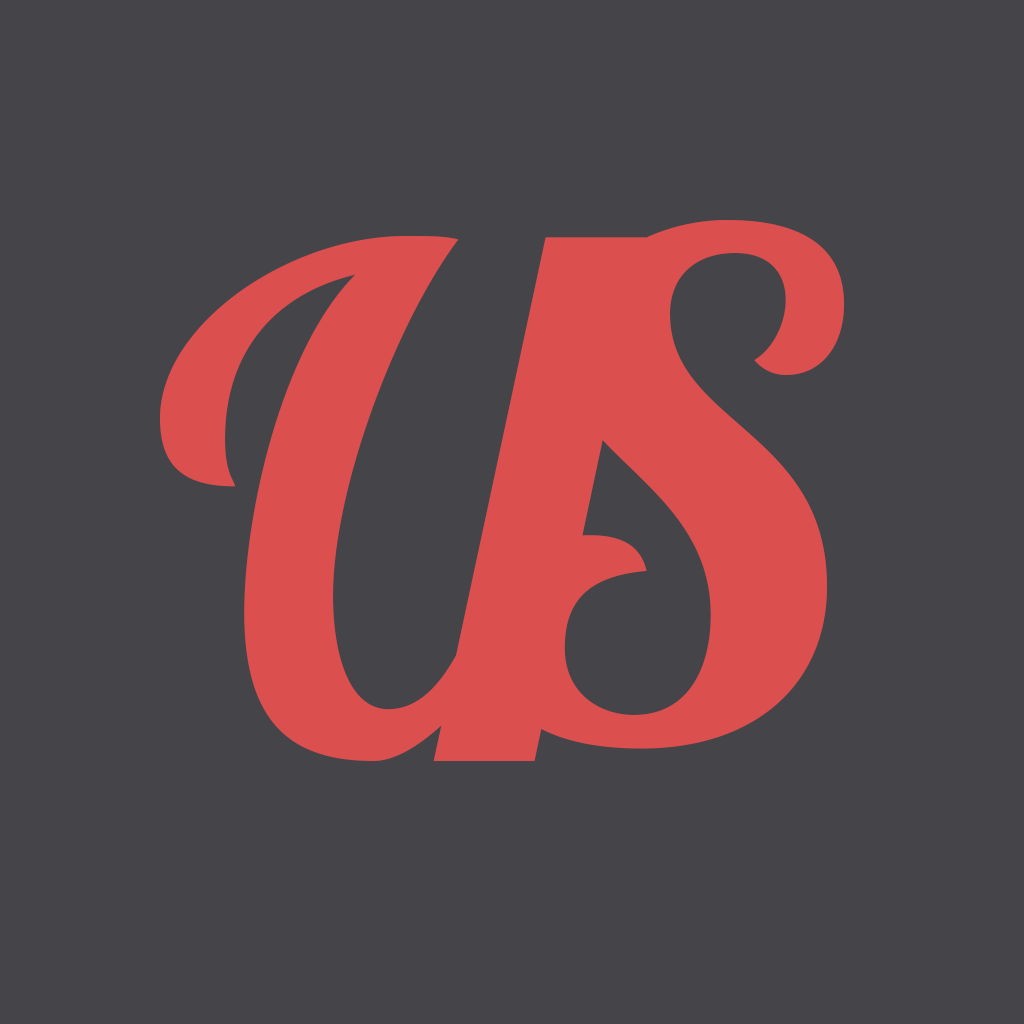
<style>
.page{position:relative;width:1024px;height:1024px;background:#444449}
.page>*{position:absolute;margin:0}
.t1{font:699.8px "Lobster1.3";color:#db4f4f}
.t2{font:700px "Lobster1.3";color:#db4f4f}
</style>
<div class="page">
<p class="t1" style="left:487px;top:220px;width:357px;height:529px">S</p>
<p class="t2" style="left:160px;top:236px;width:486px;height:525px">U</p>
</div>
